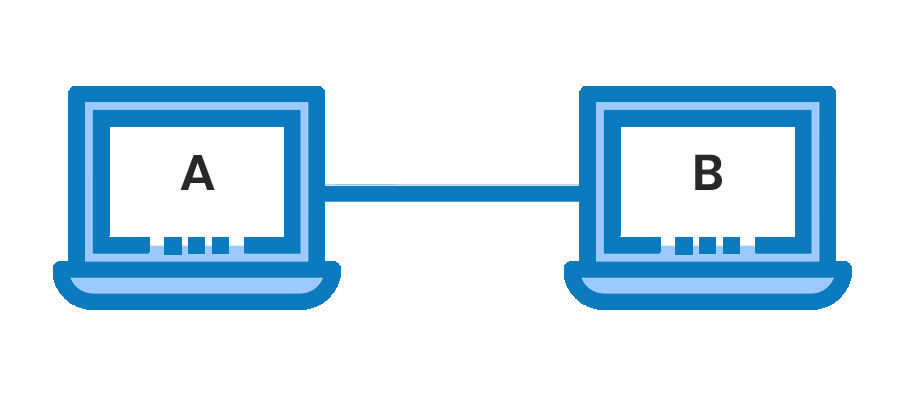
<style>
.page{position:relative;width:900px;height:400px;background:#ffffff}
.page>*{position:absolute;margin:0}
.t1{font:50px "Poppins-SemiBold";color:#282828}
</style>
<div class="page">
<p class="t1" style="left:180px;top:155px;width:35px;height:35px">A</p>
<p class="t1" style="left:695px;top:154px;width:27px;height:36px">B</p>
</div>
